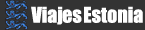
<style>
.page{position:relative;width:145px;height:30px;background:#333333}
.page>*{position:absolute;margin:0}
.t1{font:20px "Impact";color:#ffffff}
</style>
<div class="page">
<p class="t1" style="left:31px;top:6px;width:112px;height:19px">Viajes Estonia</p>
</div>
